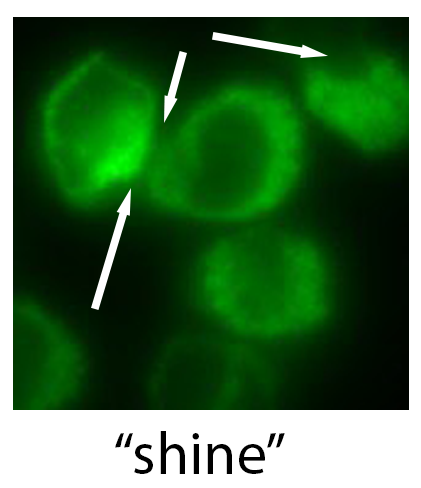
<style>
.page{position:relative;width:421px;height:488px;background:#ffffff}
.page>*{position:absolute;margin:0}
.t1{font:60px "MyriadPro-Regular";color:#000000}
</style>
<div class="page">
<p class="t1" style="left:115px;top:431px;width:170px;height:43px">“shine”</p>
</div>
